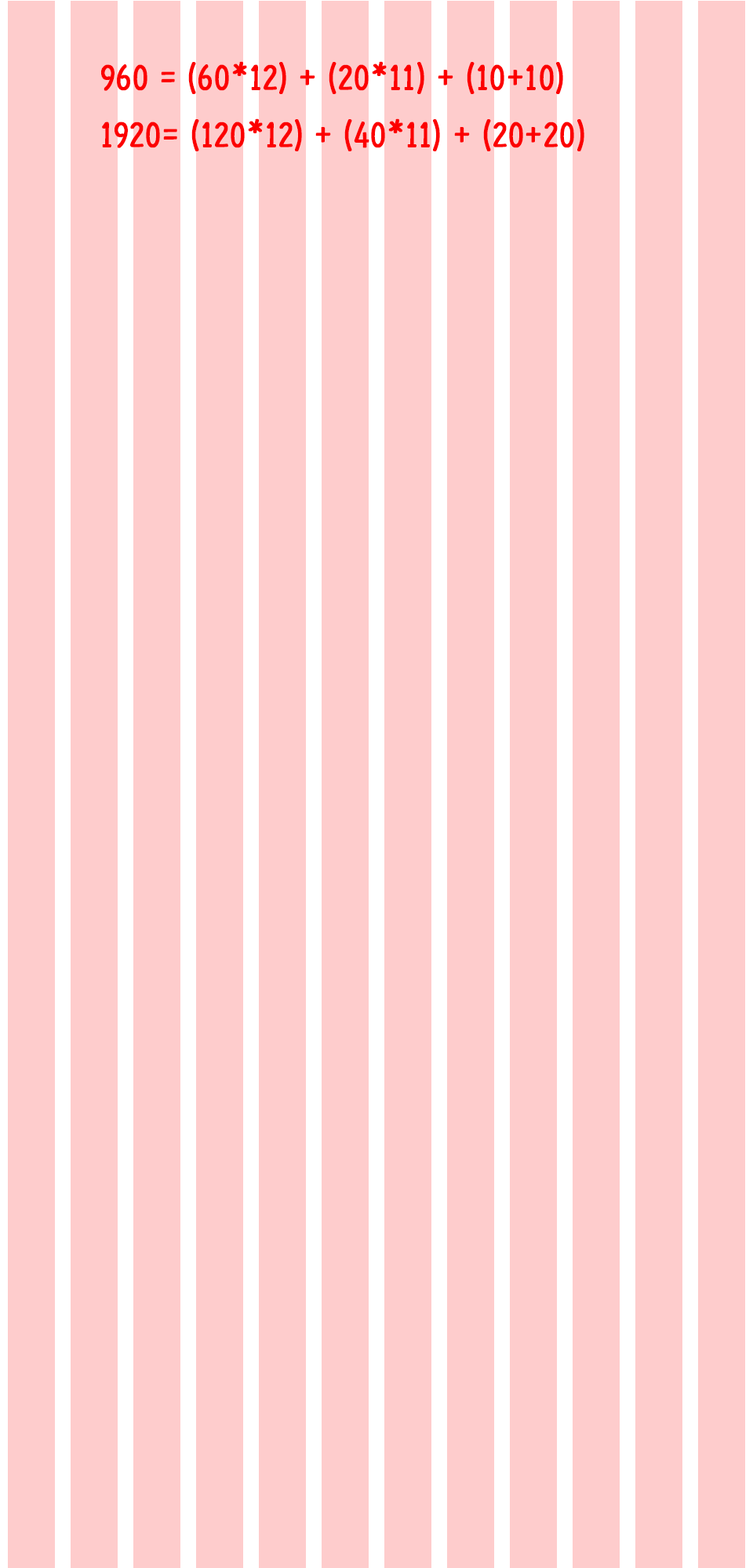
<style>
.page{position:relative;width:753px;height:1568px;background:#fecccc}
.page>*{position:absolute;margin:0}
.t1{font:37.6px "KoreanEMPJ-B";letter-spacing:-0.05em;color:#fc0000;font-weight:bold}
</style>
<div class="page">
<p class="t1" style="left:101px;top:61px;width:462px;height:33px">960 = (60*12) + (20*11) + (10+10)</p>
<p class="t1" style="left:102px;top:118px;width:482px;height:33px">1920= (120*12) + (40*11) + (20+20)</p>
</div>
